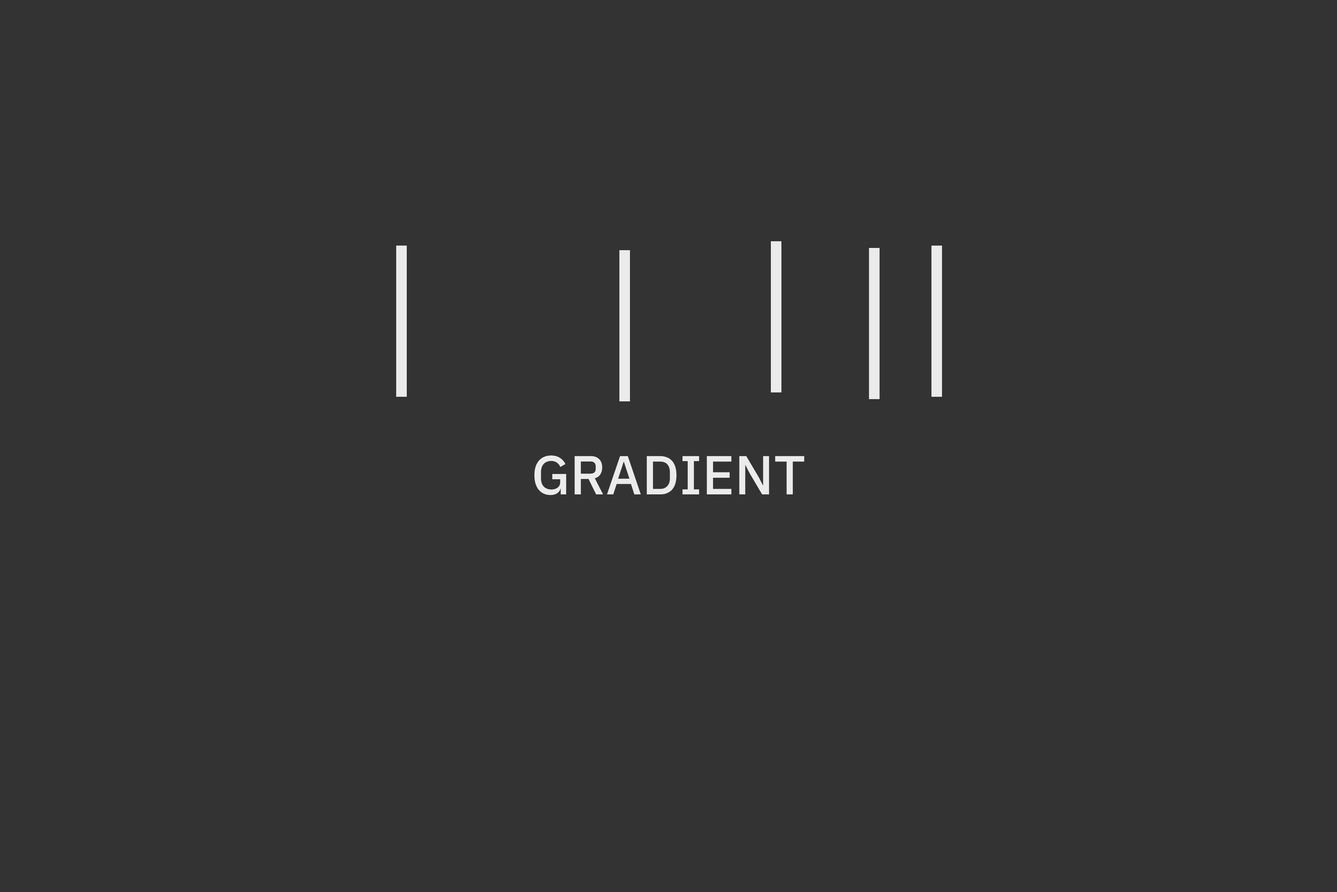
<style>
.page{position:relative;width:1337px;height:892px;background:#333333}
.page>*{position:absolute;margin:0}
.t1{font:54.9px "IBMPlexSans-Medium";color:#ebebeb}
</style>
<div class="page">
<p class="t1" style="left:534px;top:455px;width:271px;height:40px">GRADIENT</p>
</div>
